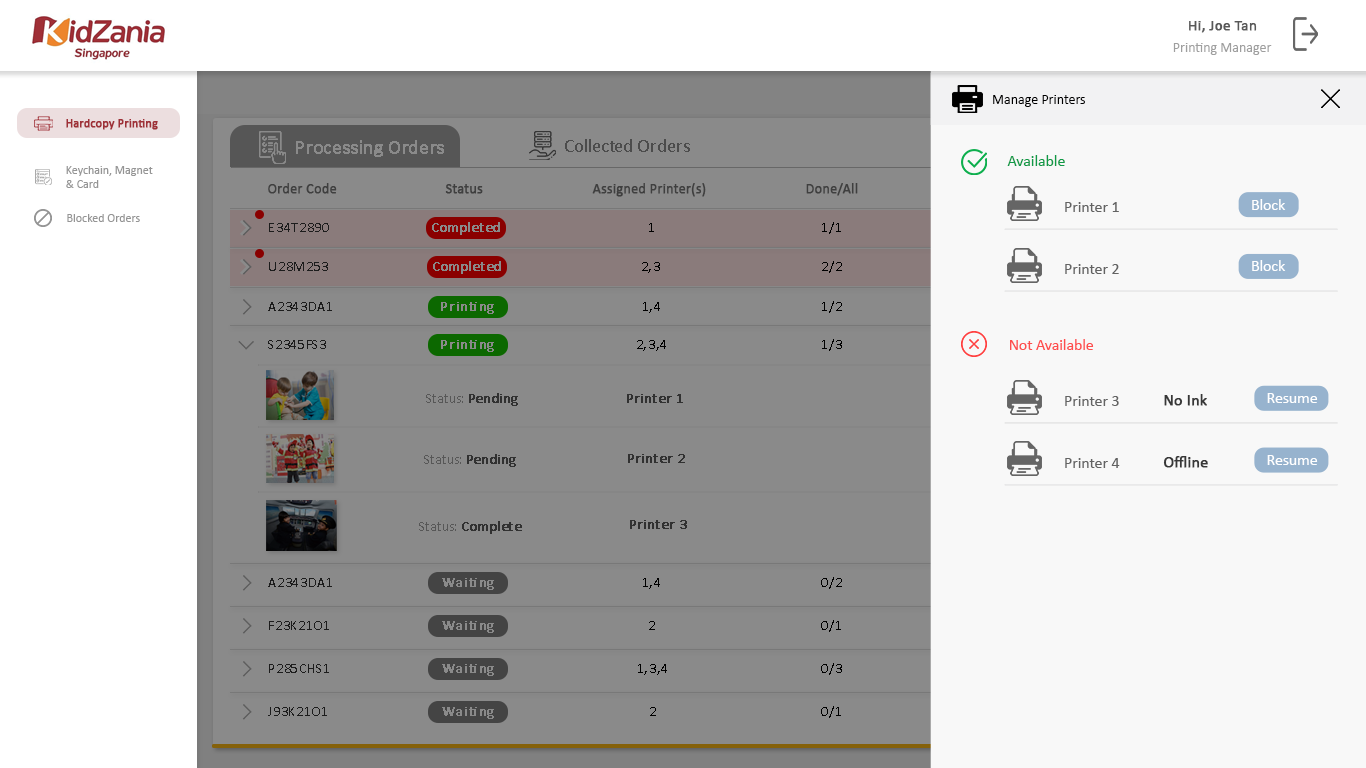
<style>
.page{position:relative;width:1366px;height:768px;background:#8a8a8a}
.page>*{position:absolute;margin:0}
.t1{font:15px "Calibri";color:#585858;font-weight:bold}
.t2{font:14px "Calibri";color:#9f9f9f}
.t3{font:14px "Calibri";color:#000000}
.t4{font:12px "Calibri";color:#9f3037;font-weight:bold}
.t5{font:19px "Calibri-Light";letter-spacing:-0.01em;color:#8a8a8a;font-weight:bold}
.t6{font:19px "Calibri";color:#4c4c4c}
.t7{font:15.7px "Calibri";color:#109a47}
.t8{font:12px/14px "Calibri";color:#959595}
.t9{font:14px "Calibri";color:#3f3f3f;font-weight:bold}
.t10{font:15.7px "Calibri";color:#636363}
.t11{font:15.7px "Calibri";color:#ffffff}
.t12{font:12px "Calibri";color:#959595}
.t13{font:14px "Calibri";letter-spacing:-0.005em;color:#8a8a8a;font-weight:bold}
.t14{font:14px "Calibri";letter-spacing:0.05em;color:#000000}
.t15{font:14px "Calibri";letter-spacing:0.05em;color:#343434}
.t16{font:14px "Calibri";letter-spacing:0.05em;color:#8a8a8a;font-weight:bold}
.t17{font:15.7px "Calibri";color:#fe4e4e}
.t18{font:14px "Calibri";color:#313131}
.t19{font:14px "Calibri";color:#313131;font-weight:bold}
.t20{font:15.7px "Calibri";color:#373737;font-weight:bold}
</style>
<div class="page">
<p class="t1" style="left:1189px;top:21px;width:68px;height:12px">Hi, Joe Tan</p>
<p class="t2" style="left:1173px;top:43px;width:99px;height:12px">Printing Manager</p>
<p class="t3" style="left:993px;top:95px;width:92px;height:12px">Manage Printers</p>
<p class="t4" style="left:66px;top:119px;width:92px;height:11px">Hardcopy Printing</p>
<p class="t5" style="left:296px;top:140px;width:148px;height:17px">Processing Orders</p>
<p class="t6" style="left:565px;top:139px;width:125px;height:13px">Collected Orders</p>
<p class="t7" style="left:1007px;top:155px;width:58px;height:11px">Available</p>
<p class="t8" style="left:66px;top:166px;width:87px;height:22px">Keychain, Magnet <br>&amp; Card</p>
<p class="t9" style="left:268px;top:183px;width:69px;height:11px">Order Code</p>
<p class="t9" style="left:445px;top:184px;width:38px;height:10px">Status</p>
<p class="t9" style="left:592px;top:183px;width:114px;height:14px">Assigned Printer(s)</p>
<p class="t9" style="left:806px;top:183px;width:52px;height:13px">Done/All</p>
<p class="t10" style="left:1065px;top:202px;width:54px;height:10px">Printer 1</p>
<p class="t11" style="left:1252px;top:199px;width:34px;height:11px">Block</p>
<p class="t12" style="left:67px;top:214px;width:73px;height:8px">Blocked Orders</p>
<p class="t13" style="left:432px;top:222px;width:68px;height:13px">Completed</p>
<p class="t14" style="left:822px;top:222px;width:19px;height:12px">1/1</p>
<p class="t15" style="left:269px;top:223px;width:60px;height:9px">E34T2890</p>
<p class="t14" style="left:649px;top:223px;width:5px;height:9px">1</p>
<p class="t15" style="left:269px;top:262px;width:59px;height:9px">U28M253</p>
<p class="t13" style="left:433px;top:261px;width:68px;height:13px">Completed</p>
<p class="t14" style="left:642px;top:262px;width:18px;height:11px">2,3</p>
<p class="t14" style="left:822px;top:261px;width:20px;height:12px">2/2</p>
<p class="t10" style="left:1065px;top:264px;width:54px;height:10px">Printer 2</p>
<p class="t11" style="left:1252px;top:260px;width:34px;height:11px">Block</p>
<p class="t15" style="left:268px;top:302px;width:64px;height:9px">A2343DA1</p>
<p class="t16" style="left:441px;top:302px;width:53px;height:12px">Printing</p>
<p class="t14" style="left:643px;top:302px;width:17px;height:11px">1,4</p>
<p class="t14" style="left:822px;top:301px;width:20px;height:12px">1/2</p>
<p class="t15" style="left:268px;top:340px;width:58px;height:9px">S2345FS3</p>
<p class="t16" style="left:441px;top:340px;width:53px;height:12px">Printing</p>
<p class="t14" style="left:637px;top:340px;width:29px;height:11px">2,3,4</p>
<p class="t14" style="left:822px;top:339px;width:20px;height:12px">1/3</p>
<p class="t17" style="left:1010px;top:339px;width:84px;height:11px">Not Available</p>
<p class="t18" style="left:426px;top:393px;width:92px;height:13px">Status: <span class="t19">Pending</span></p>
<p class="t19" style="left:627px;top:394px;width:56px;height:9px"><span class="t18"> </span>Printer 1</p>
<p class="t10" style="left:1065px;top:396px;width:54px;height:10px">Printer 3</p>
<p class="t20" style="left:1164px;top:394px;width:43px;height:12px">No Ink</p>
<p class="t11" style="left:1267px;top:393px;width:51px;height:10px">Resume</p>
<p class="t18" style="left:424px;top:454px;width:92px;height:13px">Status: <span class="t19">Pending</span></p>
<p class="t19" style="left:628px;top:454px;width:57px;height:9px"><span class="t18"> </span>Printer 2</p>
<p class="t10" style="left:1065px;top:458px;width:55px;height:10px">Printer 4</p>
<p class="t20" style="left:1163px;top:456px;width:45px;height:12px">Offline</p>
<p class="t11" style="left:1267px;top:455px;width:51px;height:10px">Resume</p>
<p class="t19" style="left:419px;top:521px;width:103px;height:13px"><span class="t18">Status: </span>Complete</p>
<p class="t19" style="left:630px;top:520px;width:57px;height:9px"><span class="t18"> </span>Printer 3</p>
<p class="t15" style="left:268px;top:578px;width:64px;height:9px">A2343DA1</p>
<p class="t16" style="left:442px;top:578px;width:52px;height:12px">Waiting</p>
<p class="t14" style="left:643px;top:578px;width:17px;height:11px">1,4</p>
<p class="t14" style="left:821px;top:577px;width:21px;height:12px">0/2</p>
<p class="t15" style="left:269px;top:621px;width:60px;height:9px">F23K21O1</p>
<p class="t16" style="left:442px;top:621px;width:52px;height:12px">Waiting</p>
<p class="t14" style="left:649px;top:621px;width:6px;height:9px">2</p>
<p class="t14" style="left:821px;top:620px;width:20px;height:12px">0/1</p>
<p class="t15" style="left:269px;top:664px;width:60px;height:9px">P285CHS1</p>
<p class="t16" style="left:442px;top:664px;width:52px;height:12px">Waiting</p>
<p class="t14" style="left:638px;top:664px;width:29px;height:11px">1,3,4</p>
<p class="t14" style="left:821px;top:663px;width:21px;height:12px">0/3</p>
<p class="t15" style="left:268px;top:707px;width:59px;height:9px">J93K21O1</p>
<p class="t16" style="left:442px;top:707px;width:52px;height:12px">Waiting</p>
<p class="t14" style="left:650px;top:707px;width:6px;height:9px">2</p>
<p class="t14" style="left:821px;top:706px;width:20px;height:12px">0/1</p>
</div>
